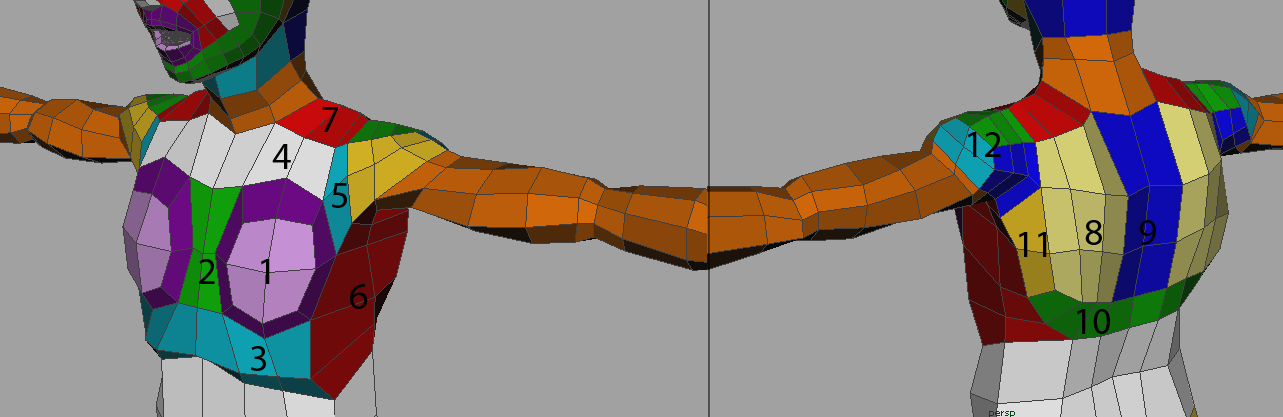
<style>
.page{position:relative;width:1283px;height:417px;background:#a1a1a1}
.page>*{position:absolute;margin:0}
.t1{font:38px "MyriadPro-Regular";color:#000000}
</style>
<div class="page">
<p class="t1" style="left:322px;top:107px;width:16px;height:25px">7</p>
<p class="t1" style="left:968px;top:132px;width:33px;height:25px">12</p>
<p class="t1" style="left:272px;top:144px;width:19px;height:25px">4</p>
<p class="t1" style="left:331px;top:183px;width:16px;height:25px">5</p>
<p class="t1" style="left:1085px;top:220px;width:17px;height:25px">8</p>
<p class="t1" style="left:1139px;top:220px;width:17px;height:25px">9</p>
<p class="t1" style="left:1019px;top:232px;width:28px;height:25px">11</p>
<p class="t1" style="left:199px;top:259px;width:16px;height:25px">2</p>
<p class="t1" style="left:261px;top:259px;width:9px;height:25px">1</p>
<p class="t1" style="left:350px;top:284px;width:18px;height:25px">6</p>
<p class="t1" style="left:1077px;top:309px;width:33px;height:25px">10</p>
<p class="t1" style="left:250px;top:346px;width:16px;height:25px">3</p>
</div>
